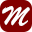
<style>
.page{position:relative;width:32px;height:32px;background:#820000}
.page>*{position:absolute;margin:0}
.t1{font:28.9px "BrushScriptMT";color:#ffffff}
</style>
<div class="page">
<p class="t1" style="left:2px;top:6px;width:28px;height:20px">M</p>
</div>
